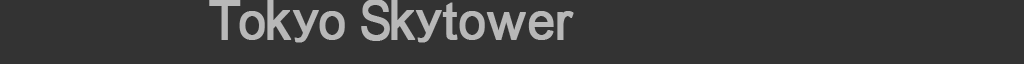
<style>
.page{position:relative;width:1024px;height:64px;background:#333333}
.page>*{position:absolute;margin:0}
.t1{font:54.1px "ArialMT";letter-spacing:-0.065em;color:#b8b8b8;font-weight:bold;scale:0.96 1}
.t2{font:52px "ArialMT";letter-spacing:-0.045em;color:#b8b8b8;font-weight:bold;scale:0.95 1}
.t3{font:54.6px "ArialMT";letter-spacing:-0.005em;color:#b8b8b8;font-weight:bold;scale:0.95 1}
.t4{font:44.2px "ArialMT";letter-spacing:-0.02em;color:#b8b8b8;font-weight:bold;scale:1.18 1}
.t5{font:52px "ArialMT";letter-spacing:-0.06em;color:#b8b8b8;font-weight:bold;scale:0.95 1}
.t6{font:54.1px "ArialMT";letter-spacing:-0.085em;color:#b8b8b8;font-weight:bold;scale:0.88 1}
.t7{font:44.2px "ArialMT";letter-spacing:-0.005em;color:#b8b8b8;font-weight:bold;scale:1.18 1}
.t8{font:52px "ArialMT";letter-spacing:-0.005em;color:#b8b8b8;font-weight:bold}
.t9{font:52px "ArialMT";letter-spacing:0.015em;color:#b8b8b8;font-weight:bold;scale:0.95 1}
.t10{font:52px "ArialMT";letter-spacing:0.015em;color:#b8b8b8;font-weight:bold}
.t11{font:52px "ArialMT";letter-spacing:-0.025em;color:#b8b8b8;font-weight:bold;scale:0.95 1}
</style>
<div class="page">
<p class="t1" style="left:209px;top:0px;width:365px;height:43px">T<span class="t2">o</span><span class="t3">k</span><span class="t4">y</span><span class="t5">o </span><span class="t6">S</span><span class="t3">k</span><span class="t7">y</span><span class="t8">t</span><span class="t9">o</span><span class="t10">w</span><span class="t11">e</span><span class="t8">r</span></p>
</div>
